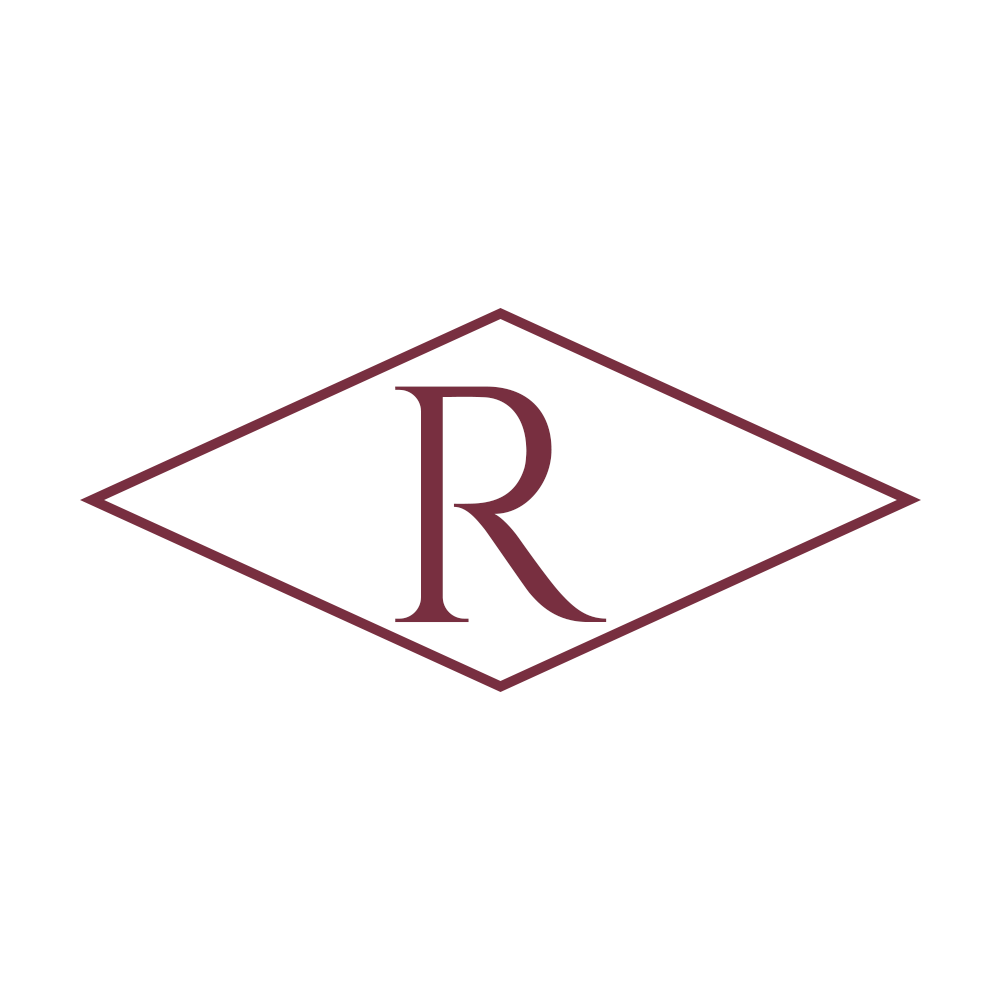
<style>
.page{position:relative;width:1000px;height:1000px;background:#ffffff}
.page>*{position:absolute;margin:0}
.t1{font:336.4px "Cinzel-Regular";color:#782f40}
</style>
<div class="page">
<p class="t1" style="left:395px;top:386px;width:212px;height:237px">R</p>
</div>
